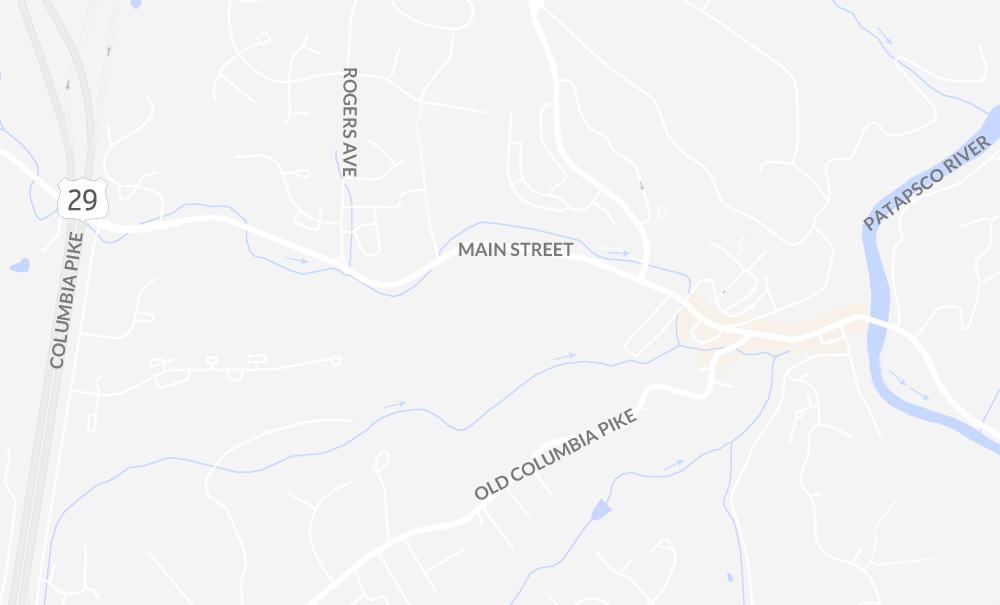
<style>
.page{position:relative;width:1000px;height:605px;background:#f4f4f4}
.page>*{position:absolute;margin:0}
.t1{font:18px "Lato-Bold";color:#7a7a7a}
</style>
<div class="page">
<p class="t1" style="left:343px;top:68px;width:14px;height:109px;rotate:90deg">ROGERS AVE</p>
<p class="t1" style="left:863px;top:136px;width:129px;height:96px;rotate:-36deg">PATAPSCO RIVER</p>
<p class="t1" style="left:50px;top:231px;width:33px;height:138px;rotate:-81deg">COLUMBIA PIKE</p>
<p class="t1" style="left:459px;top:242px;width:115px;height:14px">MAIN STREET</p>
<p class="t1" style="left:475px;top:408px;width:162px;height:92px;rotate:-27deg">OLD COLUMBIA PIKE</p>
</div>
